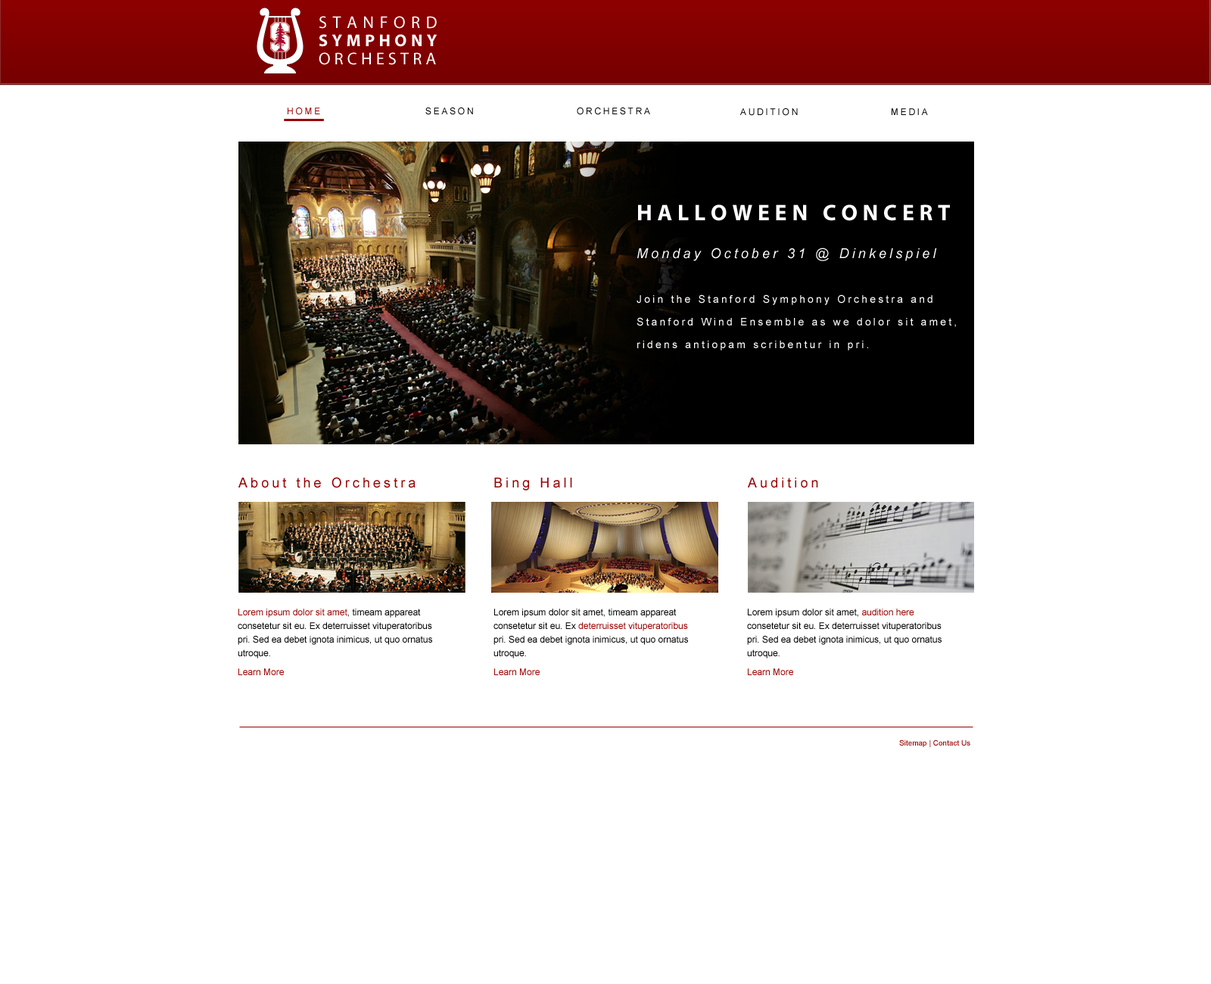
<style>
.page{position:relative;width:1211px;height:984px;background:#ffffff}
.page>*{position:absolute;margin:0}
.t1{font:17px "MyriadPro-Regular";letter-spacing:0.33em;color:#ffffff}
.t2{font:17px "MyriadPro-Bold";letter-spacing:0.24em;color:#ffffff}
.t3{font:17px "MyriadPro-Regular";letter-spacing:0.226em;color:#ffffff}
.t4{font:9.1px "ArialMT";letter-spacing:0.226em;color:#990000}
.t5{font:9.1px "ArialMT";letter-spacing:0.226em;color:#000000}
.t6{font:10.6px/22.7px "ArialMT";letter-spacing:0.226em;color:#ffffff}
.t7{font:22.7px "MyriadPro-Bold";letter-spacing:0.226em;color:#ffffff}
.t8{font:13.6px "Arial-ItalicMT";letter-spacing:0.226em;color:#ffffff}
.t9{font:13.6px "ArialMT";letter-spacing:0.226em;color:#990000}
.t10{font:9.1px/13.6px "ArialMT";color:#000000}
.t11{font:9.1px/13.6px "ArialMT";color:#990000}
.t12{font:9.1px "ArialMT";color:#990000}
.t13{font:7.6px "ArialMT";color:#990000}
</style>
<div class="page">
<p class="t1" style="left:320px;top:16px;width:117px;height:13px">STANFORD</p>
<p class="t1" style="left:320px;top:16px;width:117px;height:13px">STANFORD</p>
<p class="t2" style="left:319px;top:34px;width:119px;height:13px">SYMPHONY</p>
<p class="t2" style="left:319px;top:34px;width:119px;height:13px">SYMPHONY</p>
<p class="t3" style="left:319px;top:52px;width:117px;height:13px">ORCHESTRA</p>
<p class="t3" style="left:319px;top:52px;width:117px;height:13px">ORCHESTRA</p>
<p class="t4" style="left:288px;top:108px;width:32px;height:7px">HOME</p>
<p class="t5" style="left:426px;top:108px;width:47px;height:7px">SEASON</p>
<p class="t5" style="left:577px;top:108px;width:73px;height:7px">ORCHESTRA</p>
<p class="t5" style="left:740px;top:108px;width:58px;height:8px">AUDITION</p>
<p class="t5" style="left:892px;top:108px;width:36px;height:7px">MEDIA</p>
<p class="t6" style="left:637px;top:204px;width:319px;height:147px"><span class="t7">HALLOWEEN CONCERT<br><br></span><span class="t8">Monday October 31 @ Dinkelspiel<br><br><br></span>Join the Stanford Symphony Orchestra and <br>Stanford Wind Ensemble as we dolor sit amet,<br>ridens antiopam scribentur in pri.</p>
<p class="t9" style="left:239px;top:477px;width:177px;height:11px">About the Orchestra</p>
<p class="t9" style="left:494px;top:478px;width:78px;height:13px">Bing Hall</p>
<p class="t9" style="left:748px;top:478px;width:70px;height:10px">Audition</p>
<p class="t10" style="left:238px;top:609px;width:194px;height:50px"><span class="t11">Lorem ipsum dolor sit amet</span>, timeam appareat<br>consetetur sit eu. Ex deterruisset vituperatoribus<br>pri. Sed ea debet ignota inimicus, ut quo ornatus<br>utroque.</p>
<p class="t10" style="left:494px;top:609px;width:194px;height:50px">Lorem ipsum dolor sit amet, timeam appareat<br>consetetur sit eu. Ex <span class="t11">deterruisset vituperatoribus<br></span>pri. Sed ea debet ignota inimicus, ut quo ornatus<br>utroque.</p>
<p class="t10" style="left:747px;top:609px;width:195px;height:50px">Lorem ipsum dolor sit amet, <span class="t11">audition here<br></span>consetetur sit eu. Ex deterruisset vituperatoribus<br>pri. Sed ea debet ignota inimicus, ut quo ornatus<br>utroque.</p>
<p class="t12" style="left:239px;top:669px;width:45px;height:6px">Learn More</p>
<p class="t12" style="left:494px;top:669px;width:46px;height:6px">Learn More</p>
<p class="t12" style="left:748px;top:669px;width:45px;height:6px">Learn More</p>
<p class="t13" style="left:900px;top:740px;width:71px;height:8px">Sitemap | Contact Us</p>
</div>
